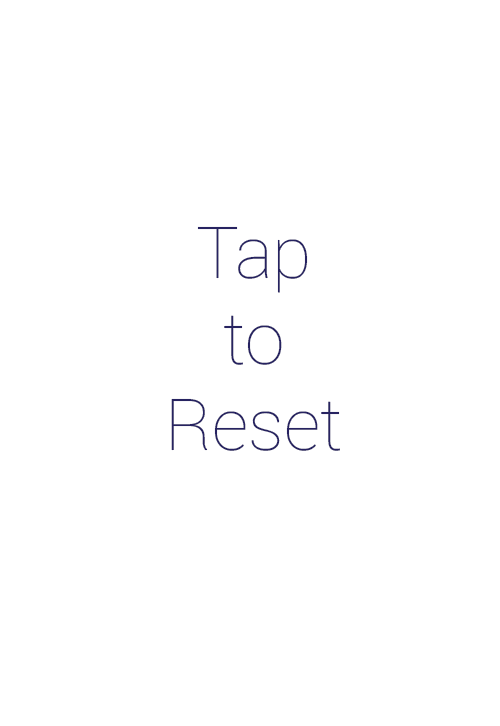
<style>
.page{position:relative;width:500px;height:726px;background:#ffffff}
.page>*{position:absolute;margin:0}
.t1{font:71.8px "Roboto-Thin";color:#272361}
</style>
<div class="page">
<p class="t1" style="left:171px;top:226px;width:169px;height:225px;text-align:center">Tap<br>to<br>Reset</p>
</div>
